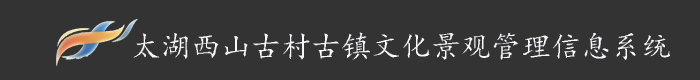
<style>
.page{position:relative;width:700px;height:80px;background:#333333}
.page>*{position:absolute;margin:0}
.t1{font:30px "¿¬Ìå";color:#f8f8fc}
</style>
<div class="page">
<p class="t1" style="left:133px;top:32px;width:537px;height:28px">太湖西山古村古镇文化景观管理信息系统</p>
</div>
